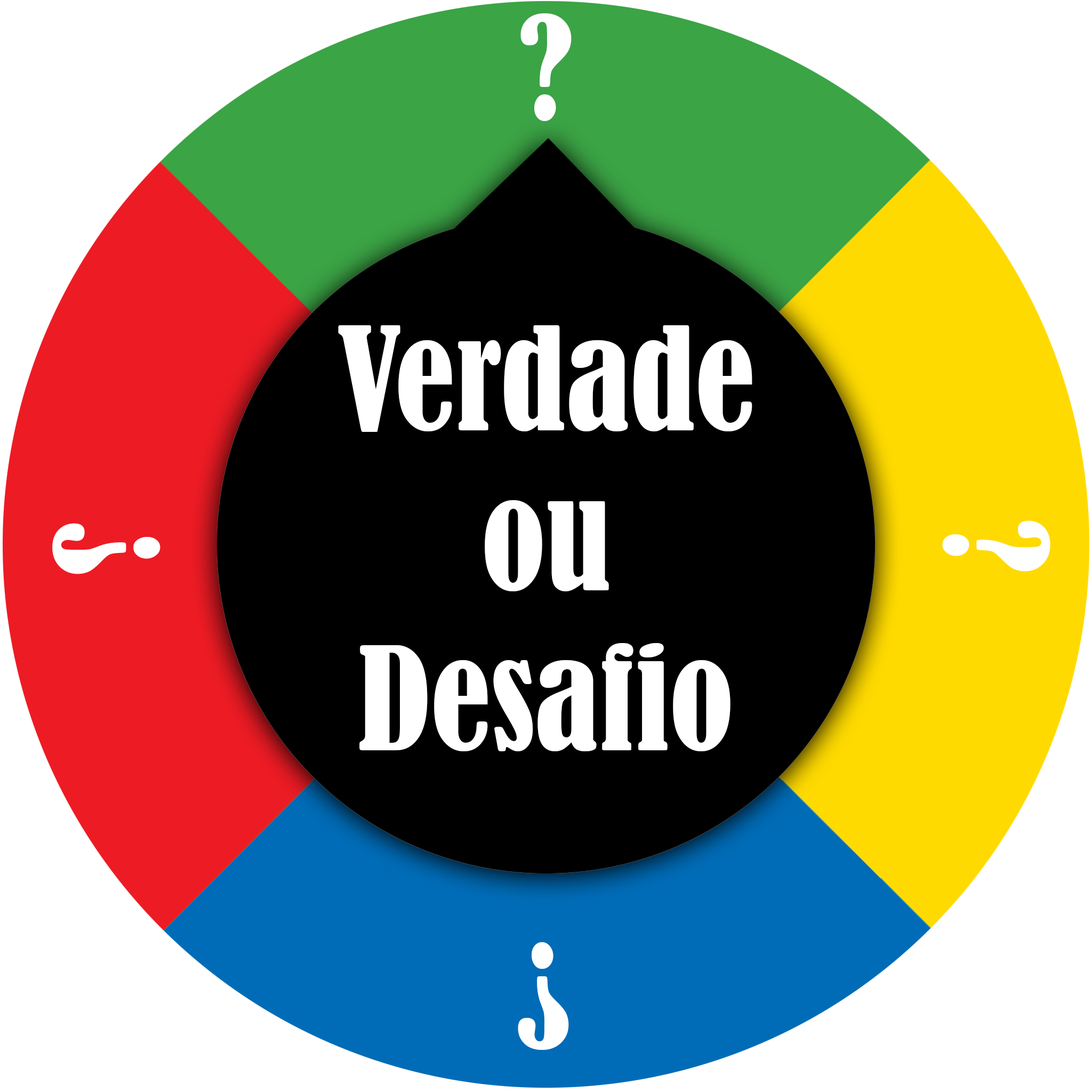
<style>
.page{position:relative;width:1092px;height:1092px;background:#ffffff}
.page>*{position:absolute;margin:0}
.t1{font:133.3px "BernardMT-Condensed";color:#ffffff}
</style>
<div class="page">
<p class="t1" style="left:520px;top:13px;width:52px;height:108px">?</p>
<p class="t1" style="left:338px;top:325px;width:414px;height:426px;text-align:center">Verdade<br>ou<br>Desafio</p>
<p class="t1" style="left:942px;top:520px;width:108px;height:52px;rotate:90deg">?</p>
<p class="t1" style="left:52px;top:523px;width:108px;height:51px;rotate:90deg">?</p>
<p class="t1" style="left:518px;top:942px;width:51px;height:108px">?</p>
</div>
